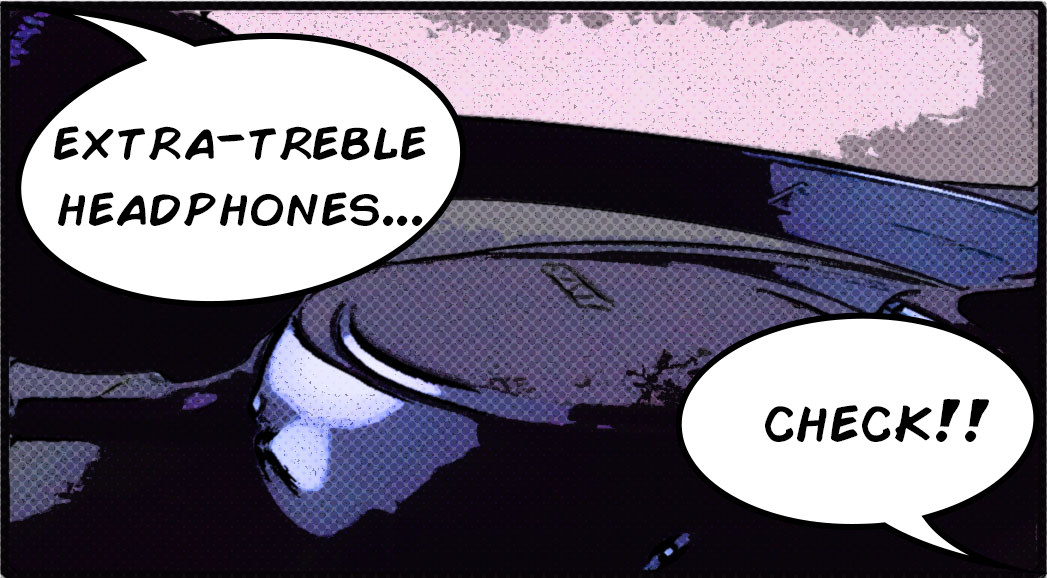
<style>
.page{position:relative;width:1047px;height:578px;background:#ffffff}
.page>*{position:absolute;margin:0}
.t1{font:55px "ComicBook";color:#000000}
.t2{font:60px "ComicBook";color:#000000}
</style>
<div class="page">
<p class="t1" style="left:54px;top:126px;width:372px;height:100px;text-align:center">extra-treble<br>headphones...</p>
<p class="t2" style="left:765px;top:399px;width:224px;height:43px">check!!</p>
</div>
